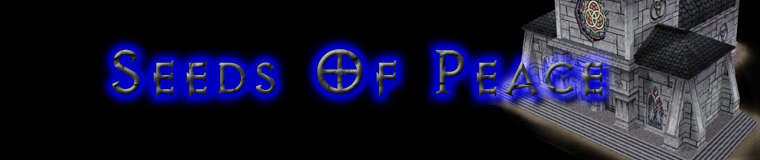
<style>
.page{position:relative;width:760px;height:160px;background:#000000}
.page>*{position:absolute;margin:0}
.t1{font:72px "AvQest"}
</style>
<div class="page">
<p class="t1" style="left:112px;top:49px;width:491px;height:49px">Seeds Of Peace</p>
</div>
